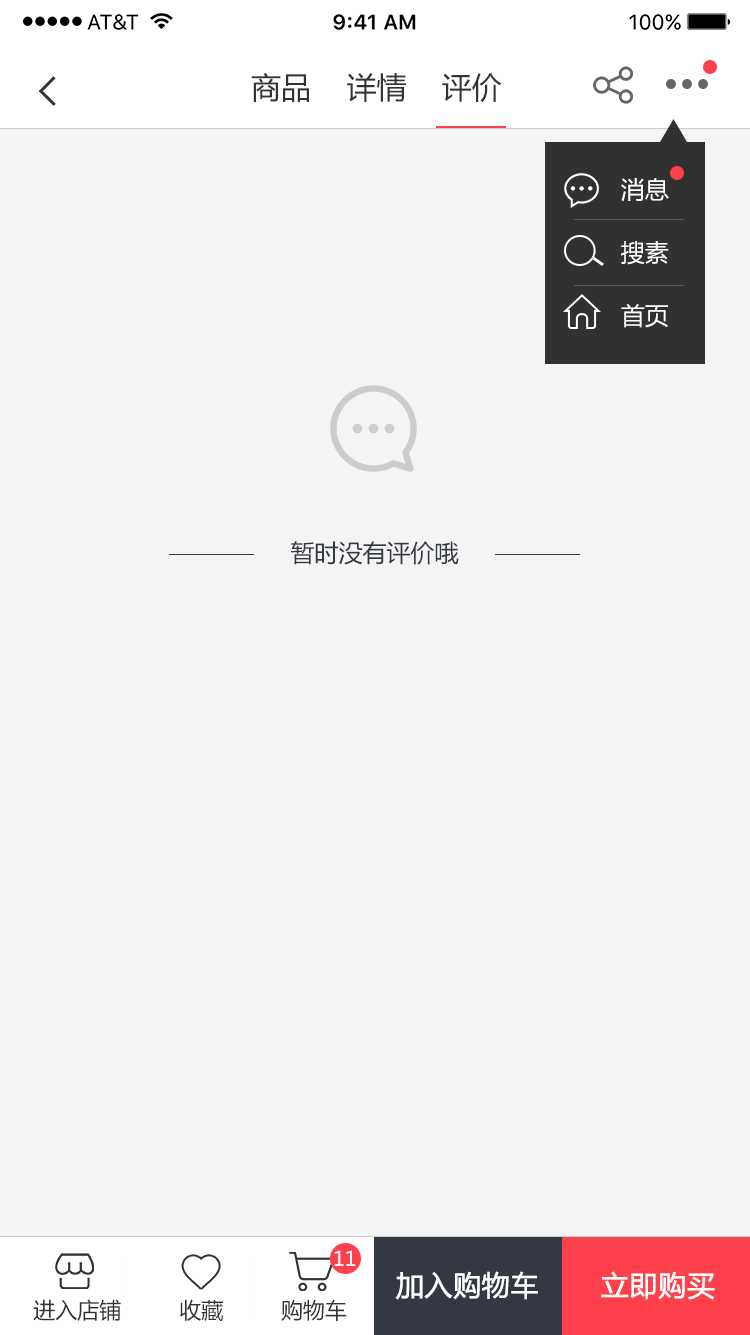
<style>
.page{position:relative;width:750px;height:1335px;background:#f4f4f4}
.page>*{position:absolute;margin:0}
.t1{font:30px "MicrosoftYaHei";color:#333333}
.t2{font:24px "MicrosoftYaHei";color:#ffffff}
.t3{font:24px "MicrosoftYaHei";color:#343843}
.t4{font:20px "MicrosoftYaHei";color:#ffffff}
.t5{font:28px "MicrosoftYaHei";color:#ffffff;font-weight:bold}
.t6{font:22px "MicrosoftYaHei";color:#333333}
</style>
<div class="page">
<p class="t1" style="left:251px;top:73px;width:251px;height:30px">商品    详情    评价</p>
<p class="t2" style="left:621px;top:178px;width:48px;height:23px">消息</p>
<p class="t2" style="left:621px;top:241px;width:48px;height:24px">搜素</p>
<p class="t2" style="left:621px;top:304px;width:47px;height:24px">首页</p>
<p class="t3" style="left:291px;top:541px;width:168px;height:24px">暂时没有评价哦</p>
<p class="t4" style="left:334px;top:1250px;width:22px;height:16px">11</p>
<p class="t5" style="left:395px;top:1271px;width:143px;height:29px">加入购物车</p>
<p class="t5" style="left:601px;top:1271px;width:114px;height:29px">立即购买</p>
<p class="t6" style="left:33px;top:1299px;width:88px;height:22px">进入店铺</p>
<p class="t6" style="left:180px;top:1299px;width:43px;height:23px">收藏</p>
<p class="t6" style="left:281px;top:1299px;width:66px;height:22px">购物车</p>
</div>
